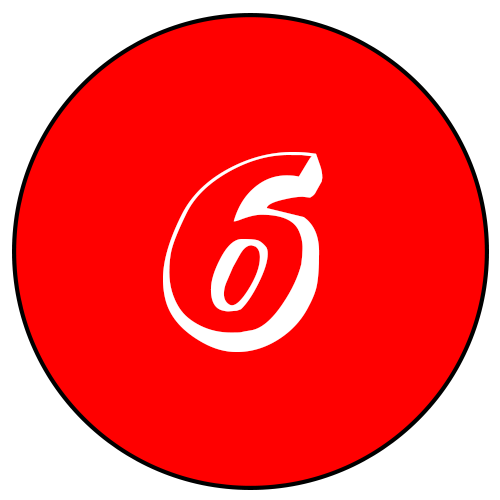
<style>
.page{position:relative;width:500px;height:500px;background:#ff0000}
.page>*{position:absolute;margin:0}
.t1{font:300px "Standout";color:#ffffff}
</style>
<div class="page">
<p class="t1" style="left:163px;top:152px;width:160px;height:200px">6</p>
</div>
